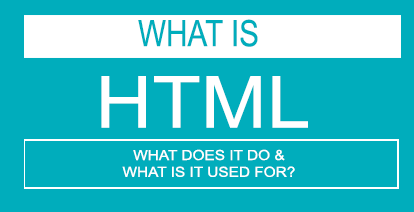
<style>
.page{position:relative;width:414px;height:212px;background:#00adbc}
.page>*{position:absolute;margin:0}
.t1{font:36.4px "ArialMT";color:#00adbc;scale:0.82 1}
.t2{font:72px "ArialMT";color:#ffffff;scale:1.1 1}
.t3{font:14px "ArialMT";color:#ffffff;scale:1.1 1}
</style>
<div class="page">
<p class="t1" style="left:138px;top:19px;width:120px;height:28px">WHAT IS</p>
<p class="t2" style="left:101px;top:76px;width:207px;height:52px">HTML</p>
<p class="t3" style="left:122px;top:149px;width:173px;height:28px;text-align:center">WHAT DOES IT DO &amp;<br>WHAT IS IT USED FOR?</p>
</div>
